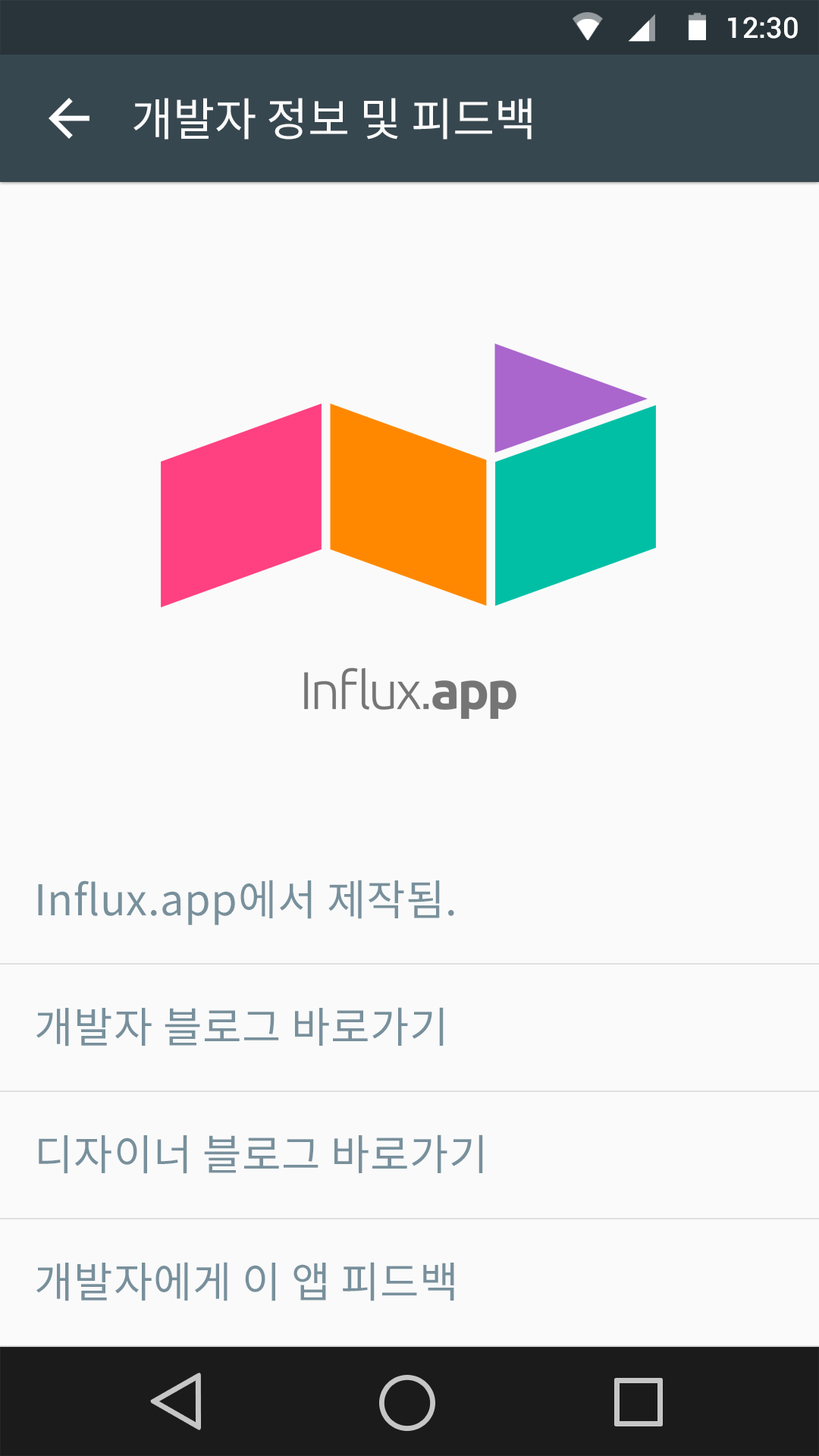
<style>
.page{position:relative;width:819px;height:1456px;background:#fafafa}
.page>*{position:absolute;margin:0}
.t1{font:28.8px "Roboto-Medium";color:#ffffff}
.t2{font:45.5px "NotoSansCJKkr-Regular";letter-spacing:-0.005em;color:#fafafa}
.t3{font:42.5px "NotoSansCJKkr-Regular";letter-spacing:0.01em;color:#78909c}
</style>
<div class="page">
<p class="t1" style="left:728px;top:17px;width:70px;height:22px">12:30</p>
<p class="t2" style="left:133px;top:98px;width:399px;height:42px">개발자 정보 및 피드백</p>
<p class="t3" style="left:38px;top:880px;width:416px;height:45px">Influx.app에서 제작됨.</p>
<p class="t3" style="left:36px;top:1007px;width:408px;height:39px">개발자 블로그 바로가기</p>
<p class="t3" style="left:39px;top:1134px;width:444px;height:40px">디자이너 블로그 바로가기</p>
<p class="t3" style="left:36px;top:1262px;width:418px;height:39px">개발자에게 이 앱 피드백</p>
</div>
